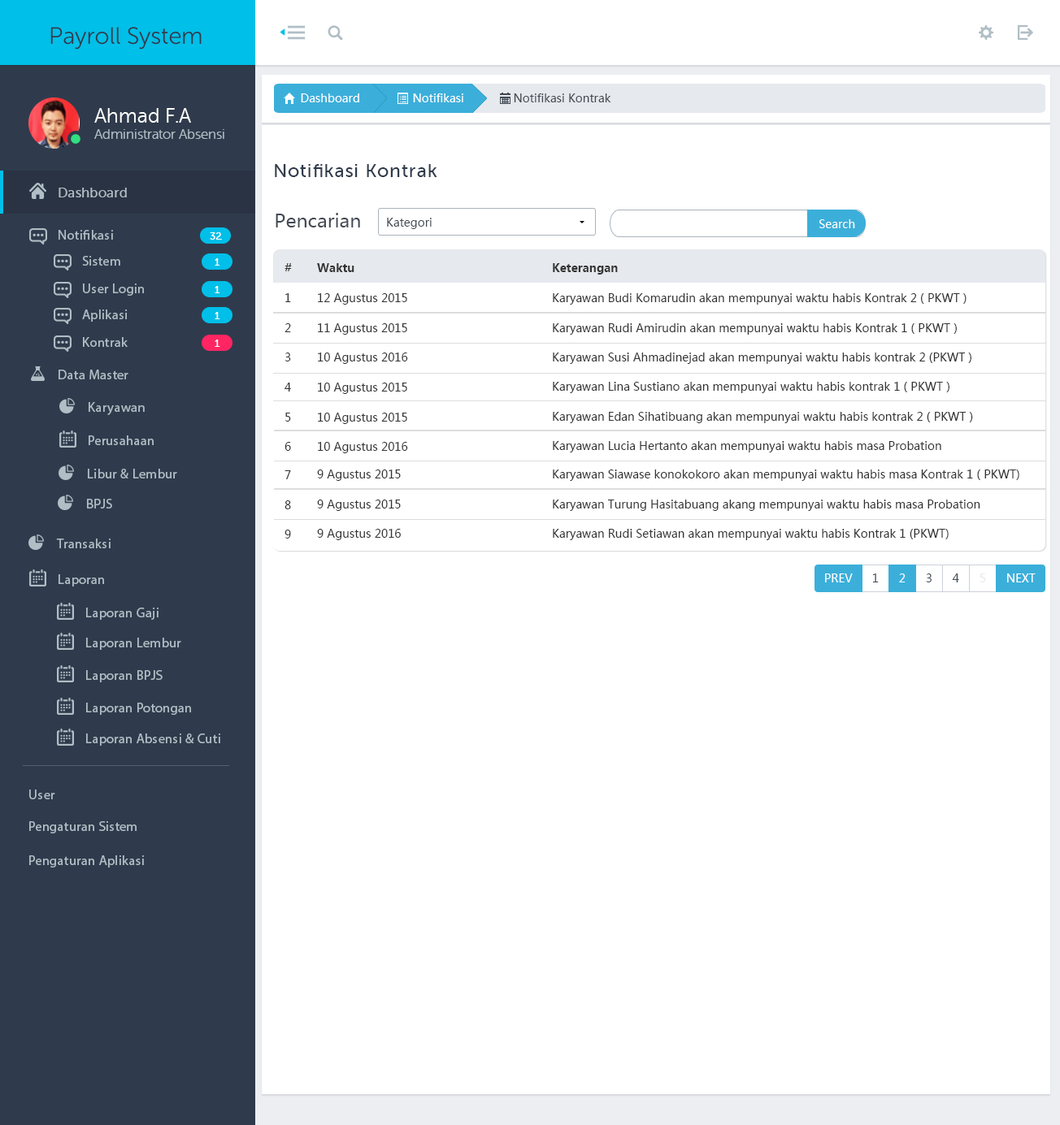
<style>
.page{position:relative;width:1060px;height:1125px;background:#ffffff}
.page>*{position:absolute;margin:0}
.t1{font:23.7px "MuseoSansRounded-300";color:#2f3b4c}
.t2{font:11.4px "MicrosoftYaHei";color:#ffffff}
.t3{font:11.4px "MicrosoftYaHei";color:#434a54}
.t4{font:13.5px "MuseoSansRounded-300";color:#b0bec5}
.t5{font:20.3px "MuseoSansRounded-300";color:#ffffff}
.t6{font:18.6px "MuseoSans-500";letter-spacing:0.04em;color:#2f3b4c}
.t7{font:13.5px "MuseoSans-500";letter-spacing:0.02em;color:#b0bec5}
.t8{font:18.6px "MicrosoftYaHei";color:#434a54}
.t9{font:13.5px "MyriadPro-Regular";letter-spacing:0.02em;color:#b0bec5}
.t10{font:10.2px "MuseoSans-500";letter-spacing:0.02em;color:#ffffff}
.t11{font:11.4px "MicrosoftYaHei-Bold";color:#333333}
.t12{font:11.4px "MicrosoftYaHei";color:#333333}
.t13{font:11.4px "MicrosoftYaHei";color:#e6e9ed}
</style>
<div class="page">
<p class="t1" style="left:50px;top:27px;width:152px;height:23px">Payroll System</p>
<p class="t2" style="left:301px;top:93px;width:58px;height:9px">Dashboard</p>
<p class="t2" style="left:413px;top:93px;width:50px;height:9px">Notifikasi</p>
<p class="t3" style="left:514px;top:93px;width:97px;height:9px">Notifikasi Kontrak</p>
<p class="t4" style="left:94px;top:108px;width:130px;height:31px"><span class="t5">Ahmad F.A <br></span>Administrator Absensi</p>
<p class="t6" style="left:275px;top:164px;width:162px;height:13px">Notifikasi Kontrak</p>
<p class="t7" style="left:59px;top:188px;width:68px;height:9px">Dashboard</p>
<p class="t8" style="left:275px;top:213px;width:85px;height:15px">Pencarian</p>
<p class="t3" style="left:387px;top:218px;width:44px;height:11px">Kategori</p>
<p class="t2" style="left:819px;top:219px;width:36px;height:9px">Search</p>
<p class="t9" style="left:59px;top:230px;width:54px;height:10px">Notifikasi</p>
<p class="t10" style="left:210px;top:232px;width:12px;height:8px">32</p>
<p class="t9" style="left:82px;top:256px;width:38px;height:10px">Sistem</p>
<p class="t10" style="left:215px;top:258px;width:5px;height:8px">1</p>
<p class="t11" style="left:284px;top:263px;width:8px;height:8px">#</p>
<p class="t11" style="left:317px;top:263px;width:37px;height:9px">Waktu</p>
<p class="t11" style="left:553px;top:263px;width:65px;height:12px">Keterangan</p>
<p class="t9" style="left:83px;top:284px;width:61px;height:12px">User Login</p>
<p class="t10" style="left:215px;top:286px;width:5px;height:7px">1</p>
<p class="t12" style="left:285px;top:293px;width:6px;height:9px">1</p>
<p class="t12" style="left:318px;top:293px;width:89px;height:12px">12 Agustus 2015</p>
<p class="t12" style="left:553px;top:293px;width:413px;height:12px">Karyawan Budi Komarudin akan mempunyai waktu habis Kontrak 2 ( PKWT )</p>
<p class="t9" style="left:82px;top:310px;width:46px;height:12px">Aplikasi</p>
<p class="t10" style="left:215px;top:312px;width:5px;height:7px">1</p>
<p class="t12" style="left:284px;top:323px;width:7px;height:9px">2</p>
<p class="t12" style="left:318px;top:323px;width:89px;height:12px">11 Agustus 2015</p>
<p class="t12" style="left:553px;top:323px;width:403px;height:12px">Karyawan Rudi Amirudin akan mempunyai waktu habis Kontrak 1 ( PKWT )</p>
<p class="t9" style="left:83px;top:337px;width:45px;height:10px">Kontrak</p>
<p class="t10" style="left:215px;top:340px;width:5px;height:7px">1</p>
<p class="t12" style="left:284px;top:353px;width:7px;height:9px">3</p>
<p class="t12" style="left:318px;top:353px;width:90px;height:11px">10 Agustus 2016</p>
<p class="t12" style="left:553px;top:353px;width:418px;height:11px">Karyawan Susi Ahmadinejad akan mempunyai waktu habis kontrak 2 (PKWT )</p>
<p class="t9" style="left:59px;top:370px;width:69px;height:9px">Data Master</p>
<p class="t12" style="left:284px;top:383px;width:7px;height:9px">4</p>
<p class="t12" style="left:318px;top:383px;width:89px;height:11px">10 Agustus 2015</p>
<p class="t12" style="left:553px;top:382px;width:396px;height:11px">Karyawan Lina Sustiano akan mempunyai waktu habis kontrak 1 ( PKWT )</p>
<p class="t9" style="left:89px;top:402px;width:56px;height:13px">Karyawan</p>
<p class="t12" style="left:285px;top:413px;width:6px;height:9px">5</p>
<p class="t12" style="left:318px;top:413px;width:89px;height:11px">10 Agustus 2015</p>
<p class="t12" style="left:553px;top:412px;width:420px;height:11px">Karyawan Edan Sihatibuang akan mempunyai waktu habis kontrak 2 ( PKWT )</p>
<p class="t9" style="left:89px;top:436px;width:65px;height:9px">Perusahaan</p>
<p class="t12" style="left:284px;top:442px;width:7px;height:9px">6</p>
<p class="t12" style="left:318px;top:442px;width:90px;height:11px">10 Agustus 2016</p>
<p class="t12" style="left:553px;top:441px;width:388px;height:12px">Karyawan Lucia Hertanto akan mempunyai waktu habis masa Probation</p>
<p class="t9" style="left:88px;top:469px;width:89px;height:10px">Libur &amp; Lembur</p>
<p class="t12" style="left:284px;top:470px;width:7px;height:9px">7</p>
<p class="t12" style="left:317px;top:470px;width:84px;height:11px">9 Agustus 2015</p>
<p class="t12" style="left:553px;top:470px;width:466px;height:11px">Karyawan Siawase konokokoro akan mempunyai waktu habis masa Kontrak 1 ( PKWT)</p>
<p class="t9" style="left:87px;top:499px;width:25px;height:10px">BPJS</p>
<p class="t12" style="left:284px;top:501px;width:7px;height:8px">8</p>
<p class="t12" style="left:317px;top:500px;width:84px;height:11px">9 Agustus 2015</p>
<p class="t12" style="left:553px;top:500px;width:427px;height:11px">Karyawan Turung Hasitabuang akang mempunyai waktu habis masa Probation</p>
<p class="t12" style="left:284px;top:530px;width:7px;height:9px">9</p>
<p class="t12" style="left:317px;top:529px;width:84px;height:11px">9 Agustus 2016</p>
<p class="t12" style="left:553px;top:529px;width:395px;height:11px">Karyawan Rudi Setiawan akan mempunyai waktu habis Kontrak 1 (PKWT)</p>
<p class="t9" style="left:56px;top:539px;width:55px;height:9px">Transaksi</p>
<p class="t9" style="left:59px;top:574px;width:45px;height:13px">Laporan</p>
<p class="t2" style="left:825px;top:574px;width:27px;height:9px">PREV</p>
<p class="t3" style="left:872px;top:574px;width:6px;height:9px">1</p>
<p class="t2" style="left:899px;top:574px;width:6px;height:9px">2</p>
<p class="t3" style="left:926px;top:574px;width:5px;height:9px">3</p>
<p class="t3" style="left:952px;top:574px;width:7px;height:9px">4</p>
<p class="t13" style="left:979px;top:574px;width:6px;height:9px">5</p>
<p class="t2" style="left:1007px;top:574px;width:28px;height:9px">NEXT</p>
<p class="t9" style="left:86px;top:608px;width:72px;height:12px">Laporan Gaji</p>
<p class="t9" style="left:86px;top:638px;width:95px;height:12px">Laporan Lembur</p>
<p class="t9" style="left:86px;top:670px;width:77px;height:13px">Laporan BPJS</p>
<p class="t9" style="left:86px;top:703px;width:105px;height:12px">Laporan Potongan</p>
<p class="t9" style="left:86px;top:734px;width:134px;height:12px">Laporan Absensi &amp; Cuti</p>
<p class="t9" style="left:29px;top:790px;width:26px;height:10px">User</p>
<p class="t9" style="left:29px;top:821px;width:108px;height:13px">Pengaturan Sistem</p>
<p class="t9" style="left:29px;top:856px;width:115px;height:12px">Pengaturan Aplikasi</p>
</div>
